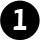
<style>
.page{position:relative;width:40px;height:40px;background:#000000}
.page>*{position:absolute;margin:0}
.t1{font:35px "YanoneKaffeesatz-Bold";color:#fefefe}
</style>
<div class="page">
<p class="t1" style="left:13px;top:9px;width:14px;height:21px">1</p>
</div>
